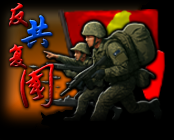
<style>
.page{position:relative;width:174px;height:140px;background:#000000}
.page>*{position:absolute;margin:0}
.t1{font:26.6px "STXingkai";font-weight:bold}
.t2{font:38px "STXingkai";font-weight:bold}
.t3{font:37.7px "²ÝÌ´Õ«Ã«Ôó¶«×ÖÌå";font-weight:bold}
</style>
<div class="page">
<p class="t1" style="left:9px;top:3px;width:20px;height:25px">反</p>
<p class="t2" style="left:21px;top:15px;width:32px;height:34px">共</p>
<p class="t1" style="left:9px;top:44px;width:19px;height:26px">复</p>
<p class="t3" style="left:20px;top:63px;width:34px;height:45px">国</p>
</div>
